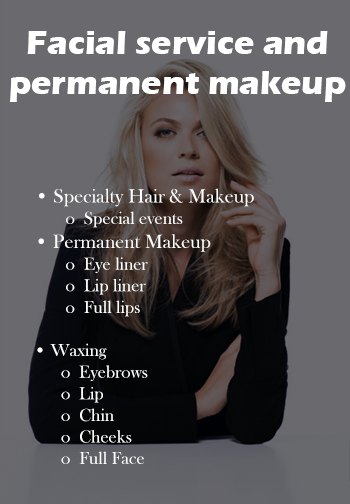
<style>
.page{position:relative;width:350px;height:504px;background:#69696e}
.page>*{position:absolute;margin:0}
.t1{font:34px "ErasITC-Bold";color:#ffffff}
.t2{font:18px "BaskOldFace";color:#ffffff}
.t3{font:20px "BaskOldFace";color:#ffffff}
</style>
<div class="page">
<p class="t1" style="left:10px;top:31px;width:336px;height:71px;text-align:center">Facial service and permanent makeup</p>
<p class="t2" style="left:37px;top:188px;width:217px;height:276px"><span class="t3">  • Specialty Hair &amp; Makeup<br></span>             o  Special events<br>     <span class="t3"> • Permanent Makeup<br></span>      o  Eye liner<br>             o  Lip liner   <br>             o  Full lips<br><br>      • Waxing<br>            o Eyebrows<br>            o Lip<br>            o Chin<br>            o Cheeks<br>            o  Full Face</p>
</div>
